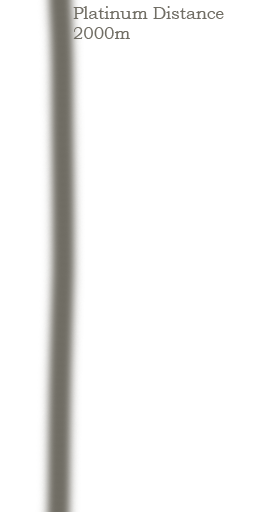
<style>
.page{position:relative;width:256px;height:512px;background:#ffffff}
.page>*{position:absolute;margin:0}
.t1{font:16.7px "BookmanOldStyle";color:#716e65}
</style>
<div class="page">
<p class="t1" style="left:73px;top:6px;width:151px;height:33px">Platinum Distance<br>2000m</p>
</div>
